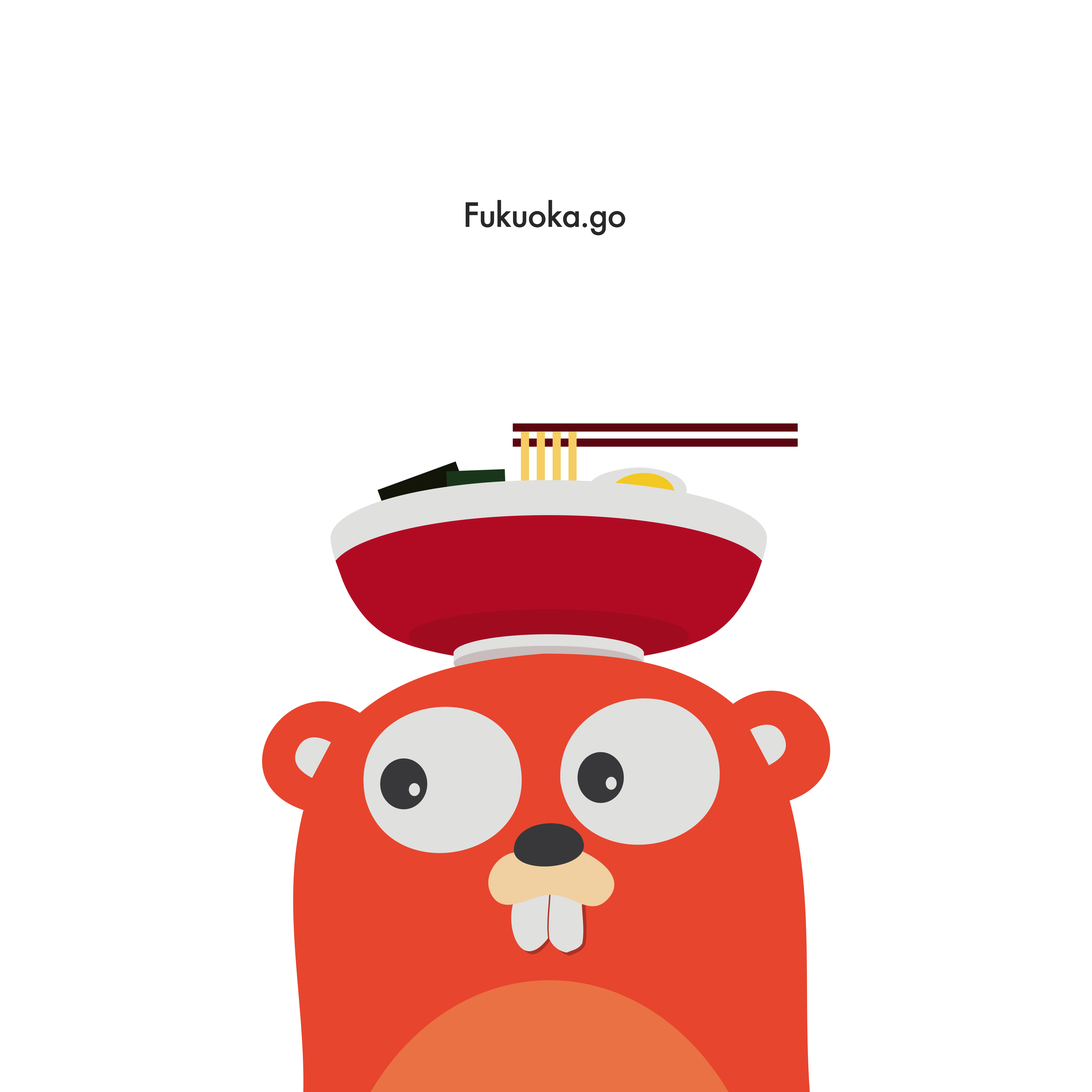
<style>
.page{position:relative;width:1092px;height:1092px;background:#ffffff}
.page>*{position:absolute;margin:0}
.t1{font:36.9px "Futura-Med";letter-spacing:-0.025em;color:#282828}
</style>
<div class="page">
<p class="t1" style="left:465px;top:200px;width:160px;height:35px">Fukuoka.go</p>
</div>
